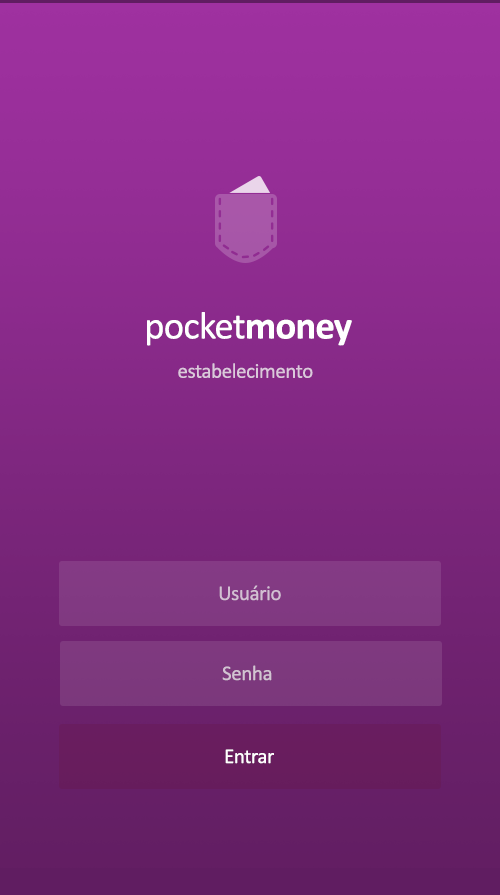
<style>
.page{position:relative;width:500px;height:895px}
.page>*{position:absolute;margin:0}
.t1{font:38.6px "Calibri";letter-spacing:-0.02em;color:#ffffff}
.t2{font:38.6px "Calibri-Bold";letter-spacing:-0.02em;color:#ffffff}
.t3{font:21px "Calibri";letter-spacing:-0.02em;color:#dbc8db}
.t4{font:21px "Calibri";letter-spacing:-0.02em;color:#d3c0d3}
.t5{font:21px "Calibri";letter-spacing:-0.02em;color:#d2c3d2}
.t6{font:21px "Calibri";letter-spacing:-0.02em;color:#ffffff}
</style>
<div class="page">
<p class="t1" style="left:147px;top:312px;width:205px;height:34px">pocket<span class="t2">money</span></p>
<p class="t3" style="left:178px;top:363px;width:135px;height:15px">estabelecimento</p>
<p class="t4" style="left:219px;top:585px;width:62px;height:16px">Usuário</p>
<p class="t5" style="left:222px;top:665px;width:50px;height:16px">Senha</p>
<p class="t6" style="left:225px;top:749px;width:49px;height:15px">Entrar</p>
</div>
